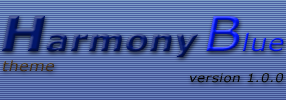
<style>
.page{position:relative;width:286px;height:100px}
.page>*{position:absolute;margin:0}
.t1{font:30px "Verdana-Bold";letter-spacing:0.025em;font-style:italic;scale:1.14 1}
.t2{font:48px "Verdana-Bold";letter-spacing:0.025em;font-style:italic;scale:1.14 1}
.t3{font:48px "Verdana";letter-spacing:0.025em;font-style:italic;scale:1.14 1}
.t4{font:24px "Verdana";letter-spacing:0.025em;font-style:italic;scale:1.14 1}
.t5{font:14px "Verdana";letter-spacing:0.025em;color:#48321a;font-style:italic;scale:1.14 1}
.t6{font:12px "Verdana";letter-spacing:0.025em;color:#010101;font-style:italic;scale:1.14 1}
</style>
<div class="page">
<p class="t1" style="left:2px;top:16px;width:282px;height:41px"><span class="t2">H</span>armony <span class="t3">B</span><span class="t4">lue</span></p>
<p class="t5" style="left:3px;top:60px;width:51px;height:12px">theme</p>
<p class="t6" style="left:189px;top:73px;width:94px;height:10px">version 1.0.0</p>
</div>
